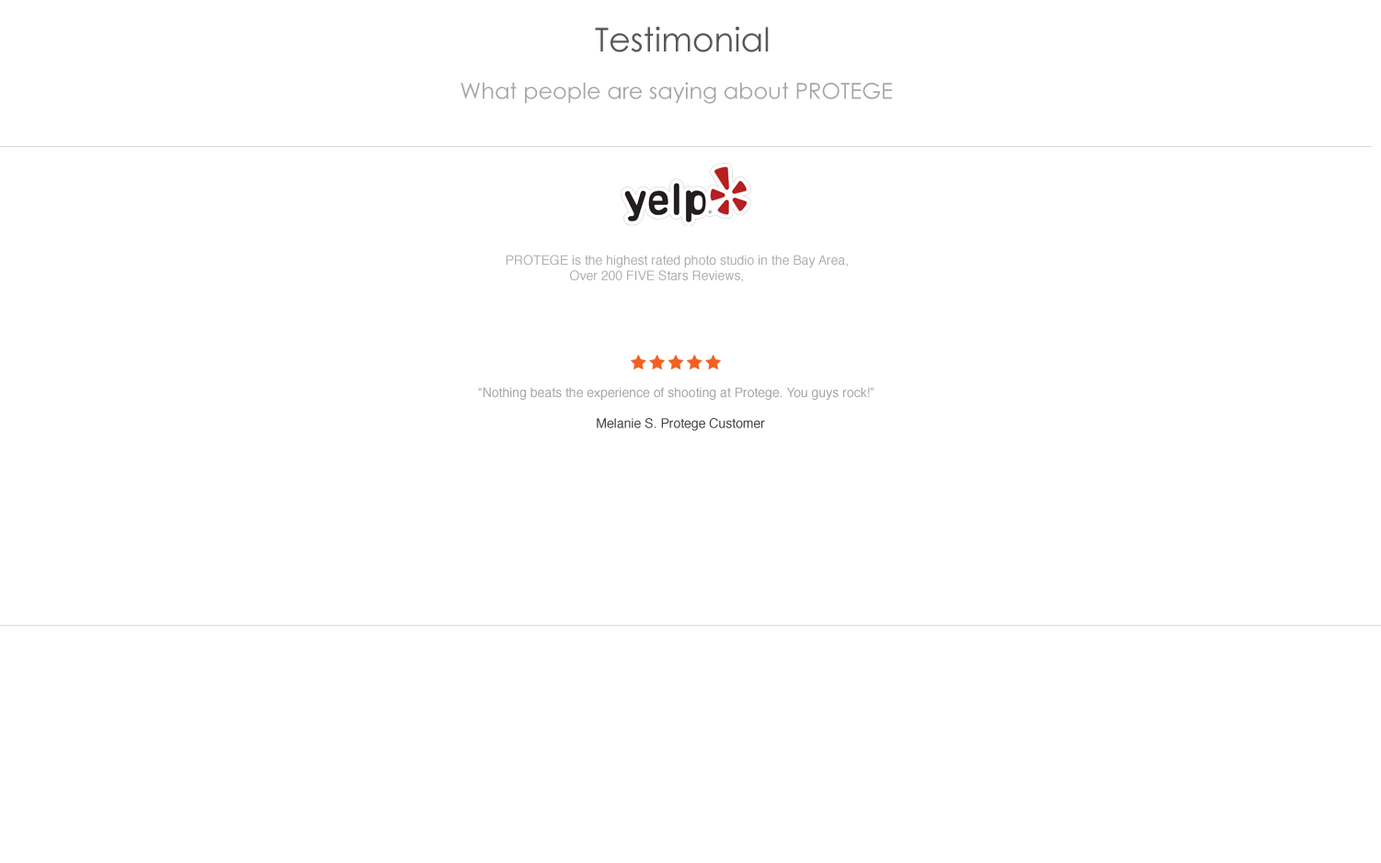
<style>
.page{position:relative;width:1381px;height:863px;background:#ffffff}
.page>*{position:absolute;margin:0}
.t1{font:33.1px "CenturyGothic";color:#585758}
.t2{font:22.1px "CenturyGothic";color:#a6a6a6}
.t3{font:12.9px "Helvetica";color:#afafaf}
.t4{font:12.9px "Helvetica";color:#a6a6a6}
.t5{font:12.9px "Helvetica";color:#434243}
</style>
<div class="page">
<p class="t1" style="left:595px;top:27px;width:174px;height:25px">Testimonial</p>
<p class="t2" style="left:461px;top:82px;width:431px;height:22px">What people are saying about PROTEGE</p>
<p class="t3" style="left:506px;top:255px;width:342px;height:27px">PROTEGE is the highest rated photo studio in the Bay Area,<br>                  Over 200 FIVE Stars Reviews,</p>
<p class="t4" style="left:478px;top:387px;width:396px;height:44px">“Nothing beats the experience of shooting at Protege. You guys rock!”<br><br>                                 <span class="t5">Melanie S. Protege Customer</span></p>
</div>
